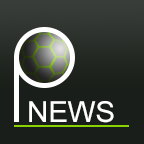
<style>
.page{position:relative;width:144px;height:144px;background:#1a1e1a}
.page>*{position:absolute;margin:0}
.t1{font:29.1px "ArialMT";color:#ffffff}
</style>
<div class="page">
<p class="t1" style="left:29px;top:101px;width:85px;height:22px">NEWS</p>
</div>
